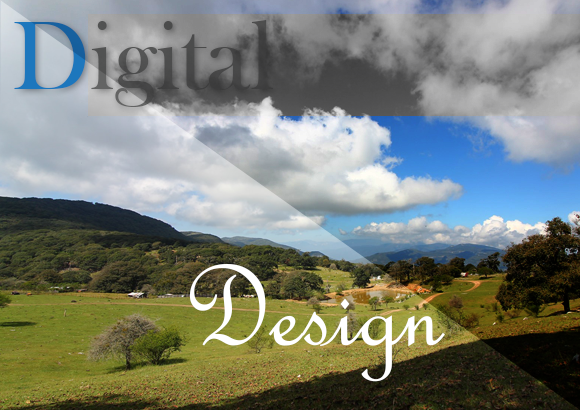
<style>
.page{position:relative;width:580px;height:410px}
.page>*{position:absolute;margin:0}
.t1{font:100.3px "BaskOldFace"}
.t2{font:124px "FrenchScriptMT";color:#ffffff}
</style>
<div class="page">
<p class="t1" style="left:14px;top:20px;width:259px;height:87px">Digital</p>
<p class="t2" style="left:189px;top:264px;width:256px;height:118px">Design</p>
</div>
